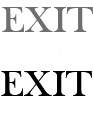
<style>
.page{position:relative;width:93px;height:128px;background:#ffffff}
.page>*{position:absolute;margin:0}
.t1{font:38px "BaskOldFace";color:#706f70}
.t2{font:38px "BaskOldFace";color:#000000}
</style>
<div class="page">
<p class="t1" style="left:2px;top:7px;width:91px;height:25px">EXIT</p>
<p class="t2" style="left:1px;top:71px;width:91px;height:25px">EXIT</p>
</div>
